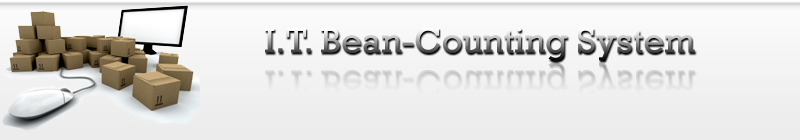
<style>
.page{position:relative;width:800px;height:140px}
.page>*{position:absolute;margin:0}
.t1{font:36px "Rockwell"}
.t2{font:36px "Rockwell";color:#dddddd}
</style>
<div class="page">
<p class="t1" style="left:265px;top:27px;width:430px;height:34px">I.T. Bean-Counting System</p>
<p class="t2" style="left:265px;top:62px;width:430px;height:34px">I.T. Bean-Counting System</p>
</div>
